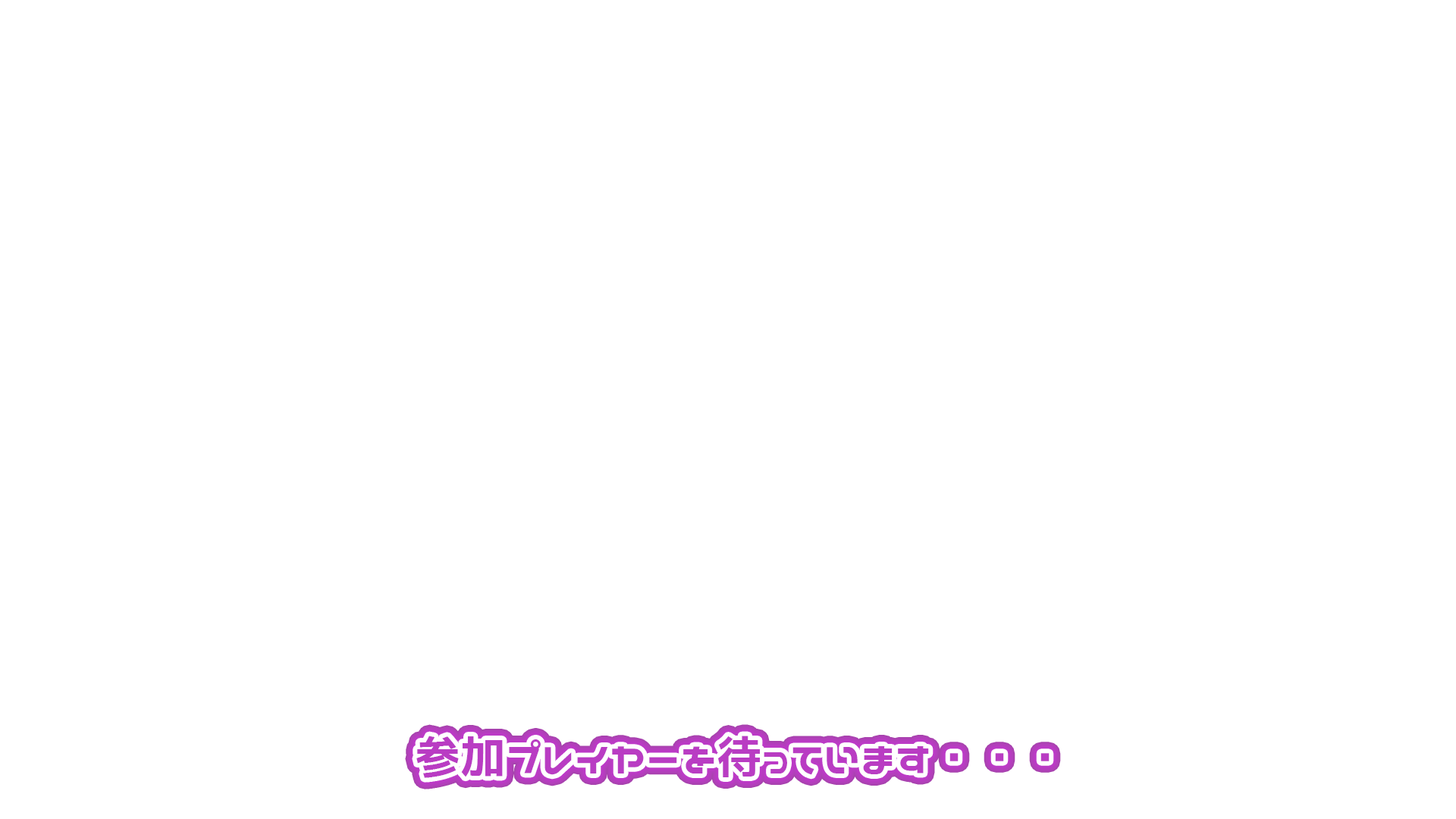
<style>
.page{position:relative;width:1456px;height:819px;background:#ffffff}
.page>*{position:absolute;margin:0}
.t1{font:45.4px "Nicoca";color:#b93cc3}
</style>
<div class="page">
<p class="t1" style="left:416px;top:736px;width:634px;height:42px">参加プレイヤーを待っています・・・</p>
</div>
